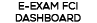
<style>
.page{position:relative;width:97px;height:23px;background:#ffffff}
.page>*{position:absolute;margin:0}
.t1{font:9.8px "NexaDemo-Light";color:#000000;font-weight:bold}
</style>
<div class="page">
<p class="t1" style="left:15px;top:2px;width:66px;height:20px;text-align:center">E-EXAM FCI<br>DASHBOARD</p>
</div>
